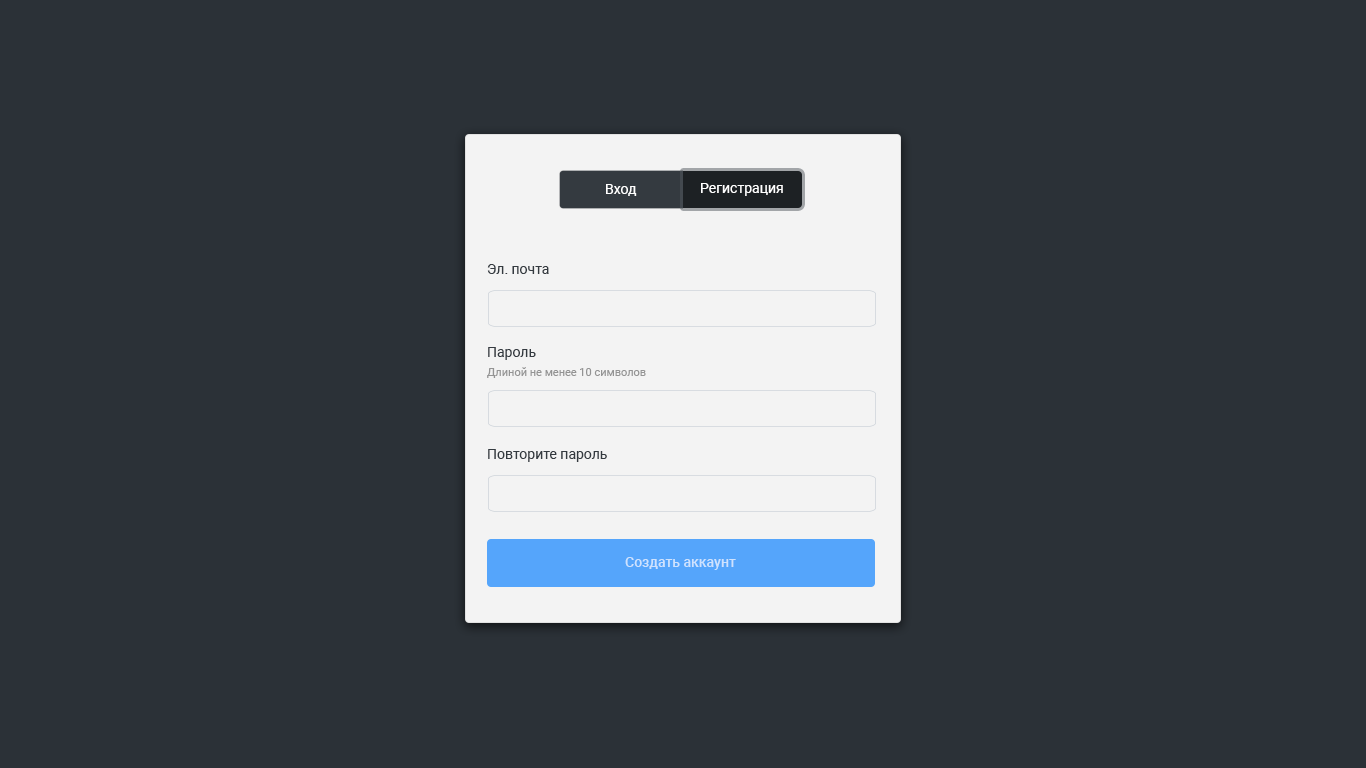
<style>
.page{position:relative;width:1366px;height:768px;background:#2b3137}
.page>*{position:absolute;margin:0}
.t1{font:14px "Roboto-Regular";color:#ffffff}
.t2{font:14px "Roboto-Regular";color:#343a40}
.t3{font:11px "Roboto-Regular";color:#949494}
.t4{font:14px "Roboto-Medium";color:#cee2fe}
</style>
<div class="page">
<p class="t1" style="left:606px;top:184px;width:31px;height:12px">Вход</p>
<p class="t1" style="left:701px;top:183px;width:82px;height:13px">Регистрация</p>
<p class="t2" style="left:487px;top:264px;width:62px;height:10px">Эл. почта</p>
<p class="t2" style="left:488px;top:347px;width:48px;height:13px">Пароль</p>
<p class="t3" style="left:487px;top:367px;width:159px;height:11px">Длиной не менее 10 символов</p>
<p class="t2" style="left:488px;top:449px;width:119px;height:13px">Повторите пароль</p>
<p class="t4" style="left:625px;top:557px;width:111px;height:13px">Создать аккаунт</p>
</div>
